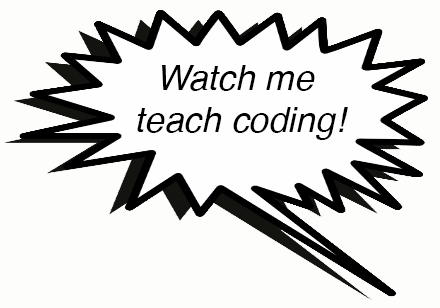
<style>
.page{position:relative;width:440px;height:308px;background:#fdfdfc}
.page>*{position:absolute;margin:0}
.t1{font:35.3px "Helvetica-Oblique";color:#000000}
</style>
<div class="page">
<p class="t1" style="left:137px;top:65px;width:211px;height:75px;text-align:center">Watch me <br>teach coding!</p>
</div>
